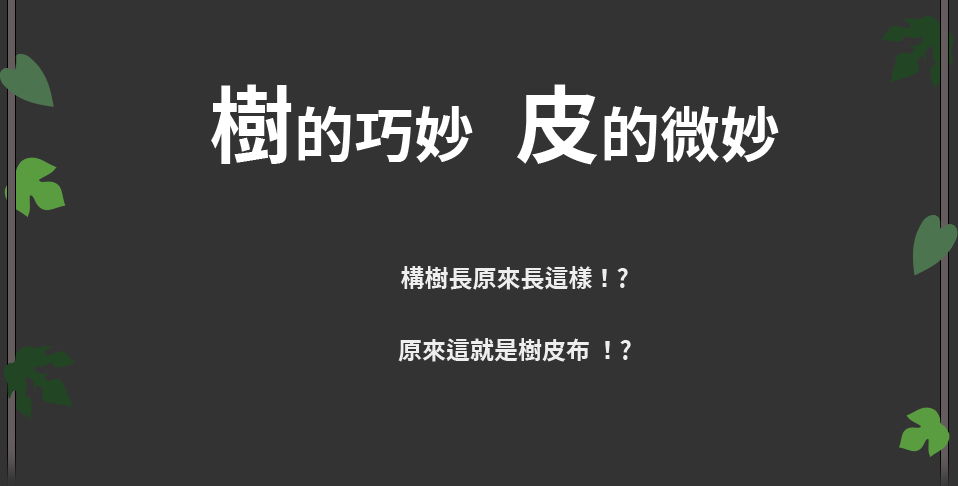
<style>
.page{position:relative;width:958px;height:486px;background:#333333}
.page>*{position:absolute;margin:0}
.t1{font:60px "TaipeiSansTCBeta-Bold";color:#ffffff}
.t2{font:85px "TaipeiSansTCBeta-Bold";color:#ffffff}
.t3{font:24px/72px "TaipeiSansTCBeta-Bold";color:#eeeeee}
</style>
<div class="page">
<p class="t1" style="left:211px;top:84px;width:568px;height:81px"><span class="t2">樹</span>的巧妙   <span class="t2">皮</span>的微妙</p>
<p class="t3" style="left:398px;top:266px;width:233px;height:96px;text-align:center">構樹長原來長這樣！?<br>原來這就是樹皮布 ！?</p>
</div>
